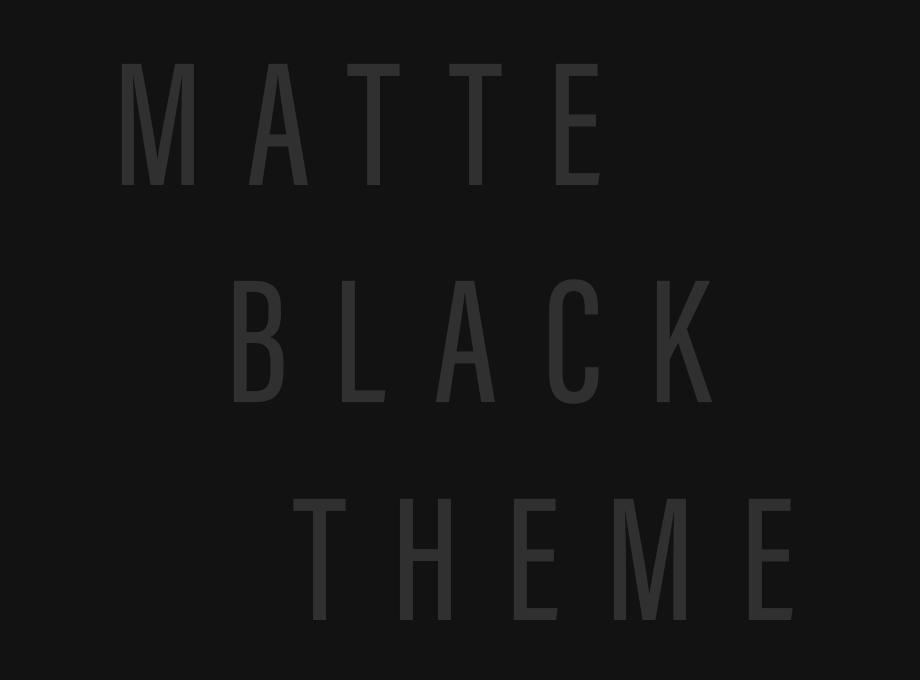
<style>
.page{position:relative;width:920px;height:680px;background:#121212}
.page>*{position:absolute;margin:0}
.t1{font:181.3px "AcuminConcept-ExtraCondensedMedium";letter-spacing:0.25em;color:#303030}
</style>
<div class="page">
<p class="t1" style="left:121px;top:63px;width:672px;height:557px">MATTE<br>    BLACK<br>   THEME</p>
</div>
